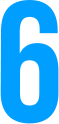
<style>
.page{position:relative;width:59px;height:124px;background:#009fff}
.page>*{position:absolute;margin:0}
.t1{font:173px "BebasNeueBold";color:#009fff}
</style>
<div class="page">
<p class="t1" style="left:0px;top:0px;width:59px;height:124px">6</p>
</div>
